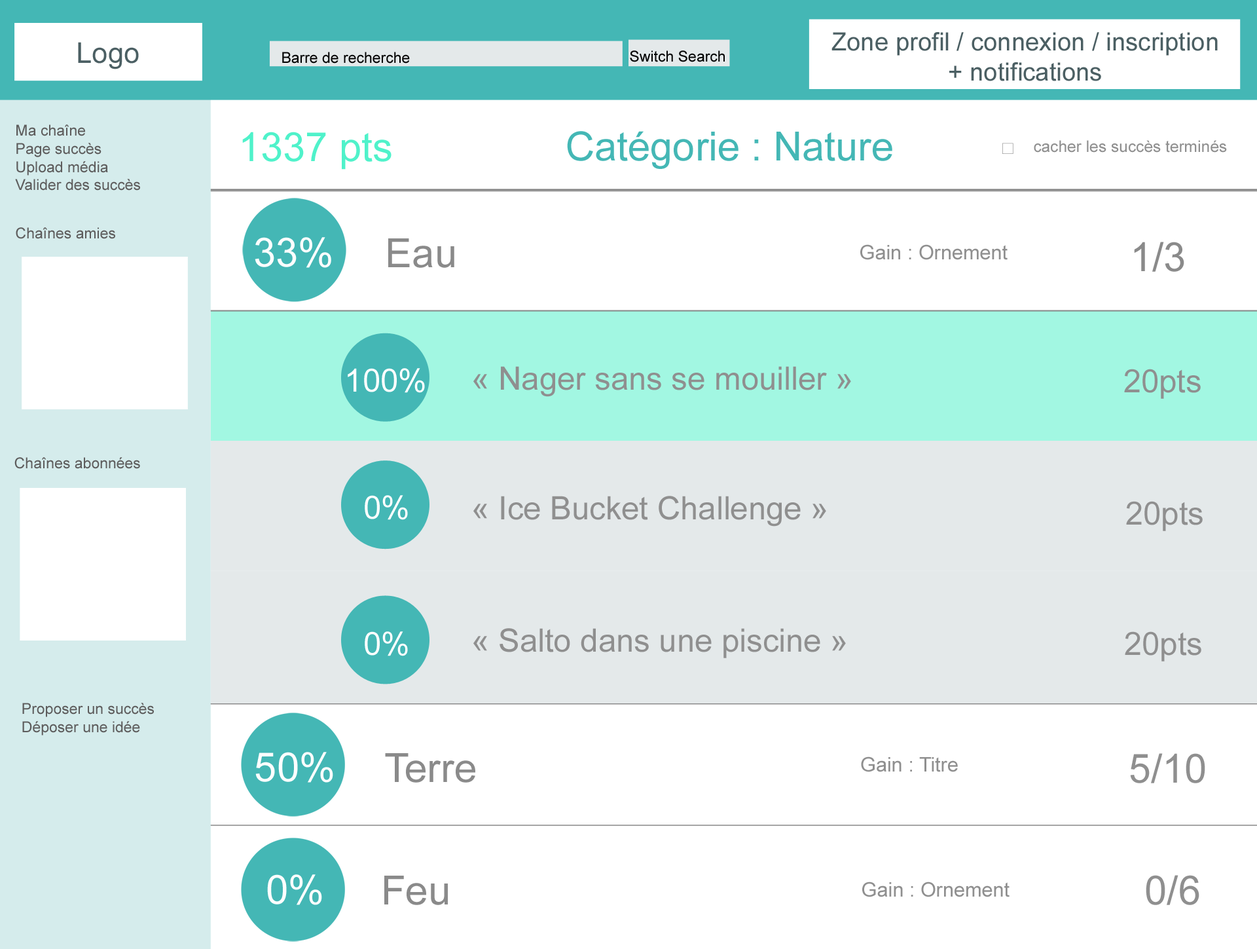
<style>
.page{position:relative;width:1257px;height:949px;background:#ffffff}
.page>*{position:absolute;margin:0}
.t1{font:28.4px "ArialMT";color:#4b5f63}
.t2{font:25.1px "ArialMT";color:#4b5f63}
.t3{font:15.1px "ArialMT";color:#000000}
.t4{font:15.1px "ArialMT";color:#5d5c5c}
.t5{font:40.2px "ArialMT";color:#4ff2ca}
.t6{font:40.2px "ArialMT";color:#44b7b5}
.t7{font:16.1px "ArialMT";color:#8f8f8f}
.t8{font:40.2px "ArialMT";color:#fefefe}
.t9{font:40.2px "ArialMT";color:#8a8a8a}
.t10{font:20.1px "ArialMT";color:#8f8f8f}
.t11{font:32.1px "ArialMT";color:#8f8f8f}
.t12{font:32.1px "ArialMT";color:#ffffff}
.t13{font:40.2px "ArialMT";color:#8f8f8f}
</style>
<div class="page">
<p class="t1" style="left:78px;top:42px;width:61px;height:27px">Logo</p>
<p class="t2" style="left:831px;top:32px;width:387px;height:49px;text-align:center">Zone profil / connexion / inscription<br>+ notifications</p>
<p class="t3" style="left:282px;top:52px;width:128px;height:12px">Barre de recherche</p>
<p class="t3" style="left:630px;top:50px;width:95px;height:12px">Switch Search</p>
<p class="t4" style="left:15px;top:124px;width:125px;height:67px">Ma chaîne<br>Page succès<br>Upload média<br>Valider des succès</p>
<p class="t5" style="left:242px;top:132px;width:150px;height:38px">1337 pts</p>
<p class="t6" style="left:567px;top:131px;width:325px;height:38px">Catégorie : Nature</p>
<p class="t7" style="left:1034px;top:140px;width:193px;height:13px">cacher les succès terminés</p>
<p class="t4" style="left:16px;top:227px;width:99px;height:12px">Chaînes amies</p>
<p class="t8" style="left:255px;top:237px;width:76px;height:31px">33%</p>
<p class="t9" style="left:388px;top:238px;width:66px;height:30px">Eau</p>
<p class="t10" style="left:860px;top:244px;width:148px;height:16px">Gain : Ornement</p>
<p class="t9" style="left:1134px;top:242px;width:50px;height:30px">1/3</p>
<p class="t11" style="left:473px;top:366px;width:378px;height:31px">« Nager sans se mouiller »</p>
<p class="t12" style="left:348px;top:368px;width:77px;height:25px">100%</p>
<p class="t11" style="left:1124px;top:369px;width:77px;height:30px">20pts</p>
<p class="t4" style="left:14px;top:457px;width:126px;height:12px">Chaînes abonnées</p>
<p class="t12" style="left:365px;top:495px;width:43px;height:25px">0%</p>
<p class="t11" style="left:473px;top:496px;width:353px;height:30px">« Ice Bucket Challenge »</p>
<p class="t11" style="left:1126px;top:501px;width:77px;height:30px">20pts</p>
<p class="t11" style="left:473px;top:628px;width:373px;height:30px">« Salto dans une piscine »</p>
<p class="t12" style="left:365px;top:631px;width:43px;height:25px">0%</p>
<p class="t11" style="left:1125px;top:631px;width:76px;height:30px">20pts</p>
<p class="t4" style="left:22px;top:702px;width:132px;height:33px">Proposer un succès<br>Déposer une idée</p>
<p class="t8" style="left:255px;top:752px;width:78px;height:30px">50%</p>
<p class="t9" style="left:385px;top:753px;width:90px;height:29px">Terre</p>
<p class="t10" style="left:861px;top:756px;width:97px;height:16px">Gain : Titre</p>
<p class="t13" style="left:1130px;top:753px;width:75px;height:30px">5/10</p>
<p class="t8" style="left:267px;top:874px;width:55px;height:31px">0%</p>
<p class="t9" style="left:384px;top:875px;width:64px;height:30px">Feu</p>
<p class="t10" style="left:862px;top:881px;width:148px;height:16px">Gain : Ornement</p>
<p class="t13" style="left:1146px;top:875px;width:53px;height:30px">0/6</p>
</div>
